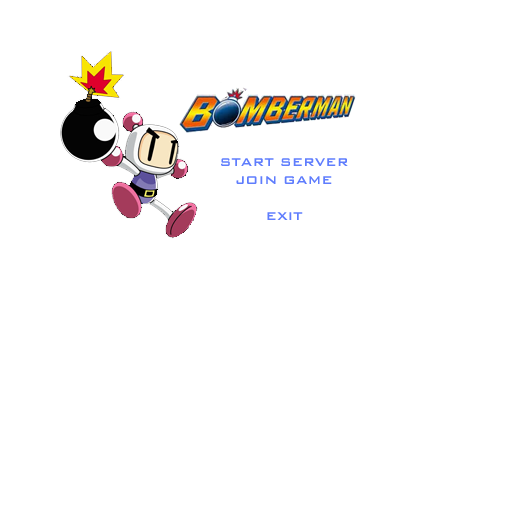
<style>
.page{position:relative;width:512px;height:512px;background:#ffffff}
.page>*{position:absolute;margin:0}
.t1{font:15px "BankGothicBT-Medium";color:#5f7dfd}
</style>
<div class="page">
<p class="t1" style="left:221px;top:158px;width:127px;height:62px;text-align:center">START SERVER<br>JOIN GAME<br><br>EXIT</p>
</div>
